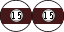
<style>
.page{position:relative;width:64px;height:32px;background:#ffffff}
.page>*{position:absolute;margin:0}
.t1{font:18.1px "CourierNewPS-BoldMT";letter-spacing:0.05em;color:#0a0a0a;scale:0.71 1}
</style>
<div class="page">
<p class="t1" style="left:12px;top:12px;width:9px;height:7px">15</p>
<p class="t1" style="left:44px;top:12px;width:9px;height:7px">15</p>
</div>
